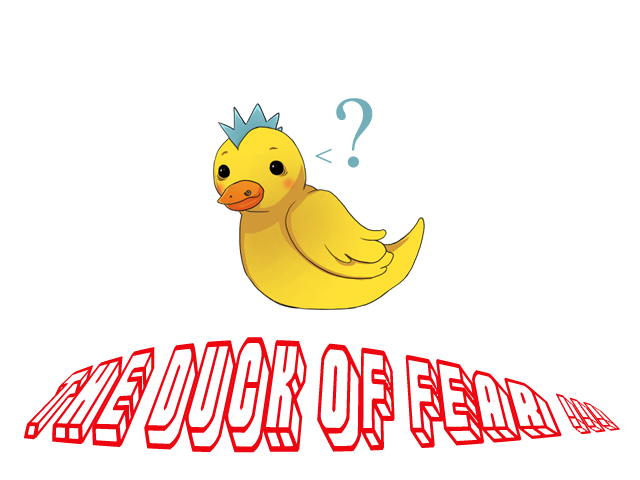
<style>
.page{position:relative;width:640px;height:480px;background:#ffffff}
.page>*{position:absolute;margin:0}
.t1{font:30px "TimesNewRomanPSMT";color:#72afb9}
.t2{font:100px "TimesNewRomanPSMT";color:#72afb9}
.t3{font:56px "Habbo-Regular";color:#ed0610}
</style>
<div class="page">
<p class="t1" style="left:315px;top:98px;width:58px;height:70px">&lt;<span class="t2">?</span></p>
<p class="t3" style="left:24px;top:337px;width:596px;height:116px">The Duck of Fear !!!</p>
</div>
